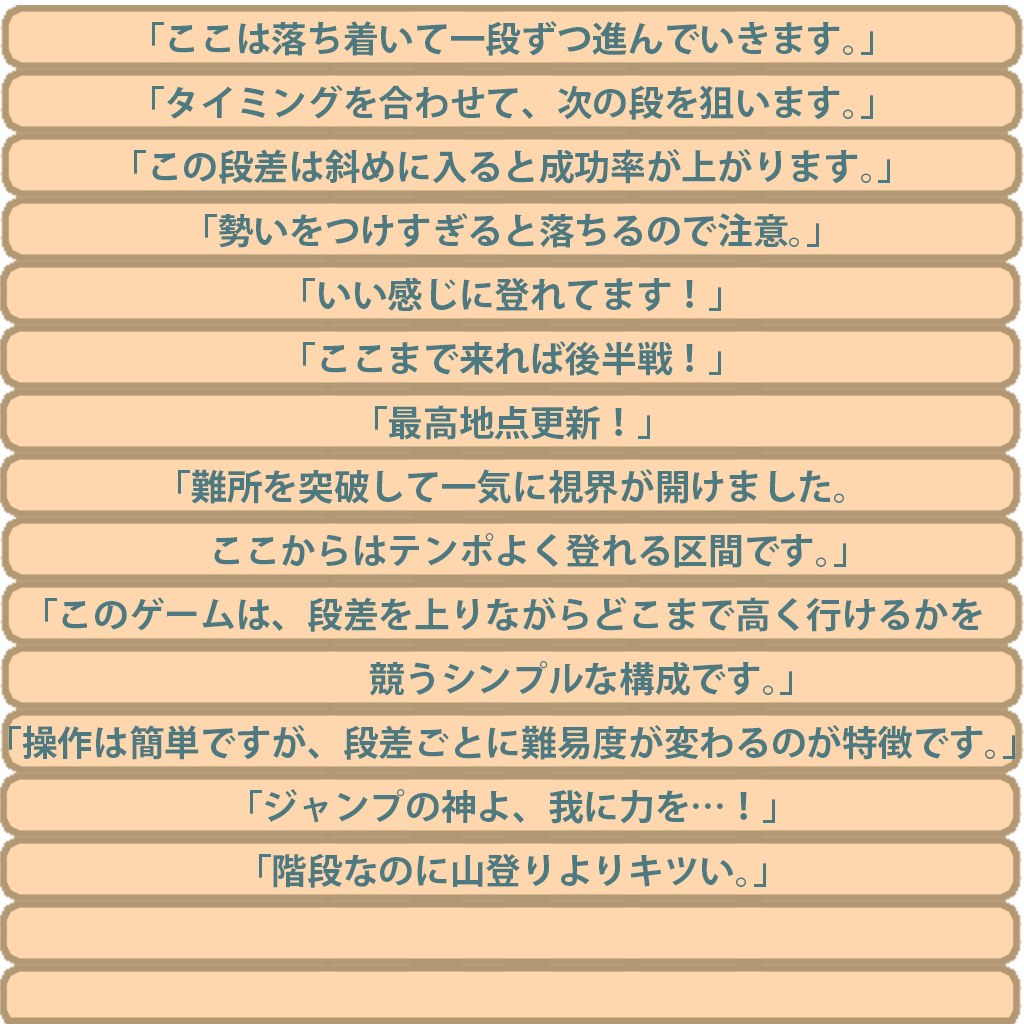
<style>
.page{position:relative;width:1024px;height:1024px;background:#fed7ae}
.page>*{position:absolute;margin:0}
.t1{font:35.7px/64px "KozGoPr6N-Bold";color:#4d7a81}
</style>
<div class="page">
<p class="t1" style="left:9px;top:21px;width:1006px;height:867px;text-align:center">「ここは落ち着いて一段ずつ進んでいきます。」<br>「タイミングを合わせて、次の段を狙います。」<br>「この段差は斜めに入ると成功率が上がります。」<br>「勢いをつけすぎると落ちるので注意。」<br>「いい感じに登れてます！」<br>「ここまで来れば後半戦！」<br>「最高地点更新！」<br>「難所を突破して一気に視界が開けました。<br>　ここからはテンポよく登れる区間です。」<br>「このゲームは、段差を上りながらどこまで高く行けるかを<br>　　　　競うシンプルな構成です。」<br>「操作は簡単ですが、段差ごとに難易度が変わるのが特徴です。」<br>「ジャンプの神よ、我に力を…！」<br>「階段なのに山登りよりキツい。」</p>
</div>
